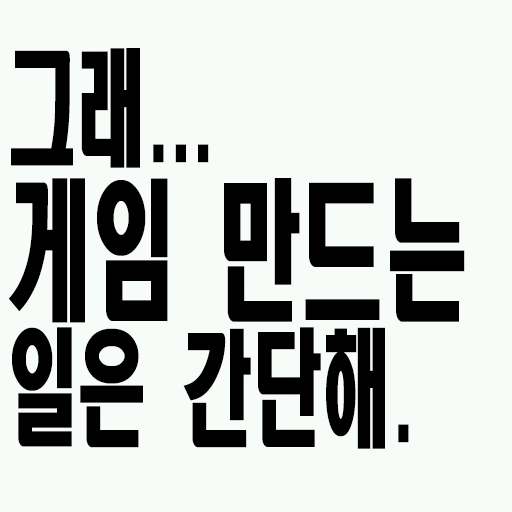
<style>
.page{position:relative;width:512px;height:512px;background:#f8fcf8}
.page>*{position:absolute;margin:0}
.t1{font:126px/140px "HeadlineR-HM";color:#000000;scale:0.56 1}
.t2{font:151.2px/140px "HeadlineR-HM";color:#000000;scale:0.56 1}
</style>
<div class="page">
<p class="t1" style="left:8px;top:48px;width:457px;height:401px">그래...<br><span class="t2">게임 만드는<br></span>일은 간단해.</p>
</div>
